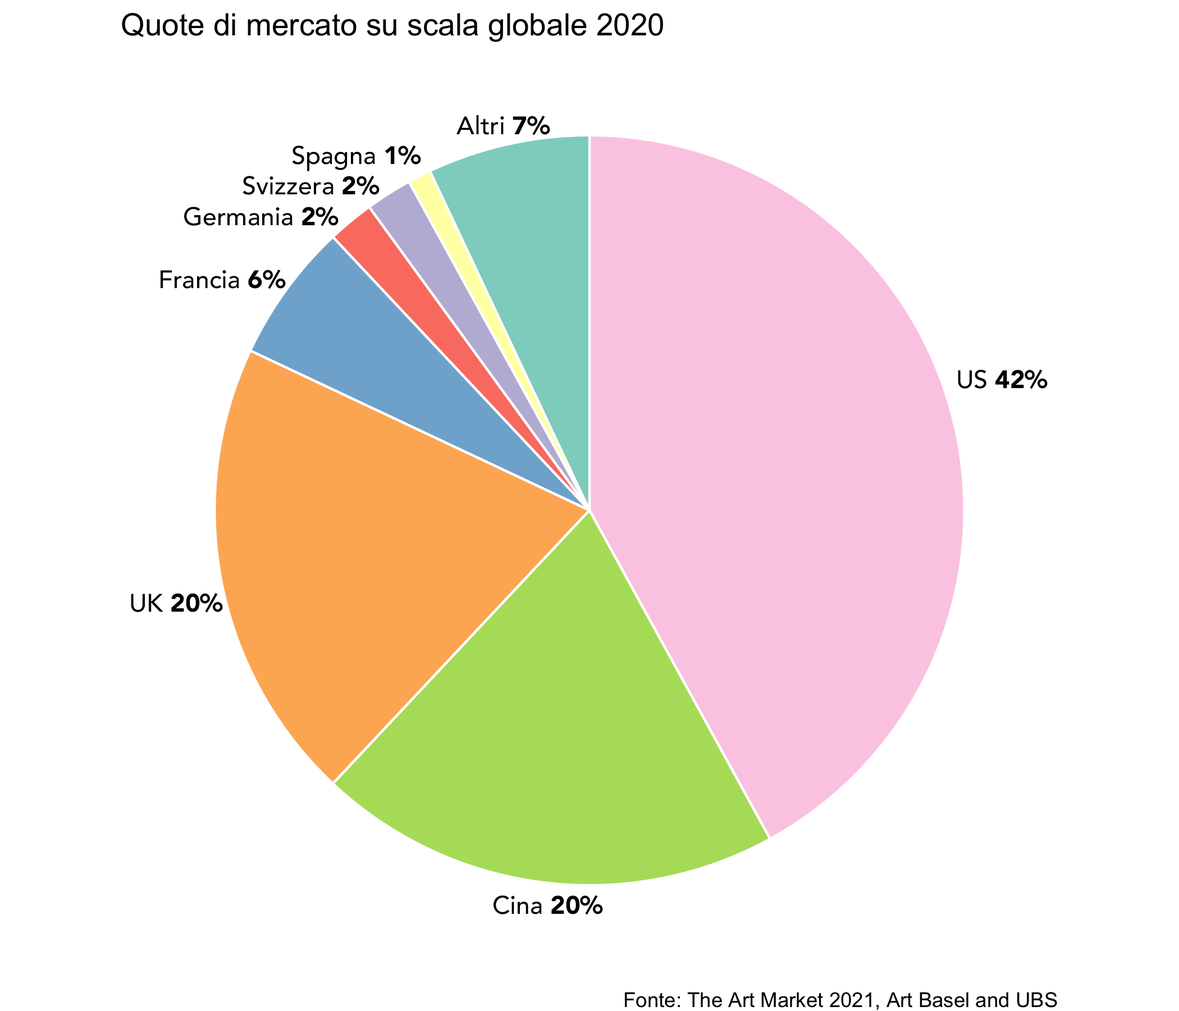
<style>
.page{position:relative;width:1179px;height:1011px;background:#ffffff}
.page>*{position:absolute;margin:0}
.t1{font:25.3px "Avenir-Medium";color:#000000}
.t2{font:25.3px "Avenir-Black";color:#000000}
</style>
<div class="page">
<p class="t1" style="left:457px;top:115px;width:93px;height:20px">Altri <span class="t2">7%</span></p>
<p class="t1" style="left:292px;top:145px;width:129px;height:26px">Spagna <span class="t2">1%</span></p>
<p class="t1" style="left:243px;top:175px;width:137px;height:20px">Svizzera <span class="t2">2%</span></p>
<p class="t1" style="left:184px;top:206px;width:155px;height:20px">Germania <span class="t2">2%</span></p>
<p class="t1" style="left:161px;top:269px;width:125px;height:20px">Francia <span class="t2">6%</span></p>
<p class="t2" style="left:958px;top:369px;width:90px;height:20px"><span class="t1">US </span>42%</p>
<p class="t2" style="left:131px;top:593px;width:92px;height:20px"><span class="t1">UK </span>20%</p>
<p class="t1" style="left:494px;top:895px;width:109px;height:20px">Cina <span class="t2">20%</span></p>
</div>
